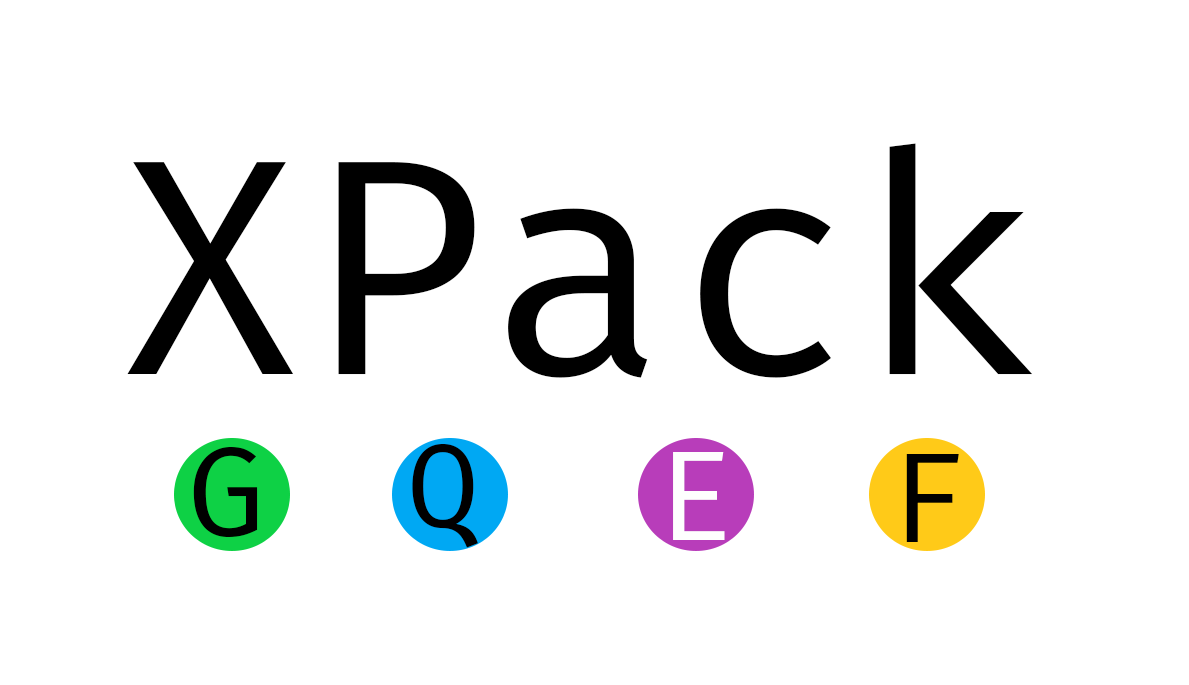
<style>
.page{position:relative;width:1189px;height:685px;background:#ffffff}
.page>*{position:absolute;margin:0}
.t1{font:300px "FiraCode-Regular";color:#000000}
.t2{font:125px "FiraCode-Regular";color:#000000}
.t3{font:116.7px "FiraCode-Regular";color:#000000}
.t4{font:125px "FiraCode-Regular";color:#fefefe}
</style>
<div class="page">
<p class="t1" style="left:127px;top:143px;width:906px;height:235px">XPack</p>
<p class="t2" style="left:193px;top:447px;width:65px;height:90px">G</p>
<p class="t3" style="left:412px;top:444px;width:66px;height:104px">Q</p>
<p class="t4" style="left:673px;top:452px;width:52px;height:88px">E</p>
<p class="t2" style="left:906px;top:454px;width:53px;height:88px">F</p>
</div>
